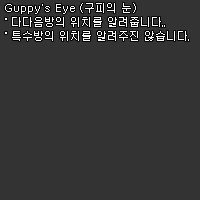
<style>
.page{position:relative;width:200px;height:200px;background:#333333}
.page>*{position:absolute;margin:0}
.t1{font:11px/14px "Dotum";color:#ffffff}
</style>
<div class="page">
<p class="t1" style="left:5px;top:3px;width:184px;height:38px">Guppy's Eye (구피의 눈)<br>˚ 다다음방의 위치를 알려줍니다..<br>˚ 특수방의 위치를 알려주진 않습니다.</p>
</div>
